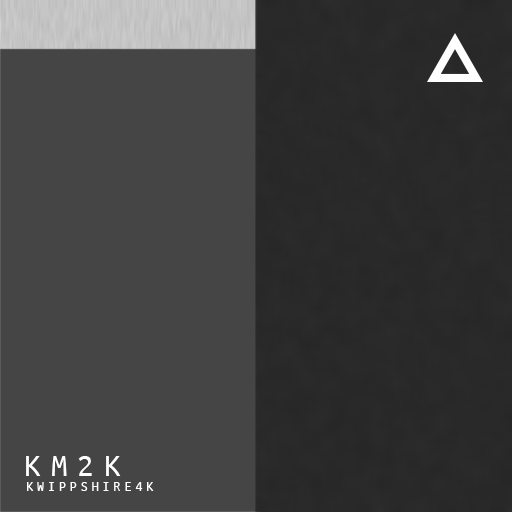
<style>
.page{position:relative;width:512px;height:512px;background:#454545}
.page>*{position:absolute;margin:0}
.t1{font:33.3px "UbuntuMono-Regular";letter-spacing:0.3em;color:#ffffff}
.t2{font:13.7px "UbuntuMono-Regular";letter-spacing:0.3em;color:#ffffff}
</style>
<div class="page">
<p class="t1" style="left:26px;top:456px;width:95px;height:20px">KM2K</p>
<p class="t2" style="left:27px;top:482px;width:127px;height:9px">KWIPPSHIRE4K</p>
</div>
